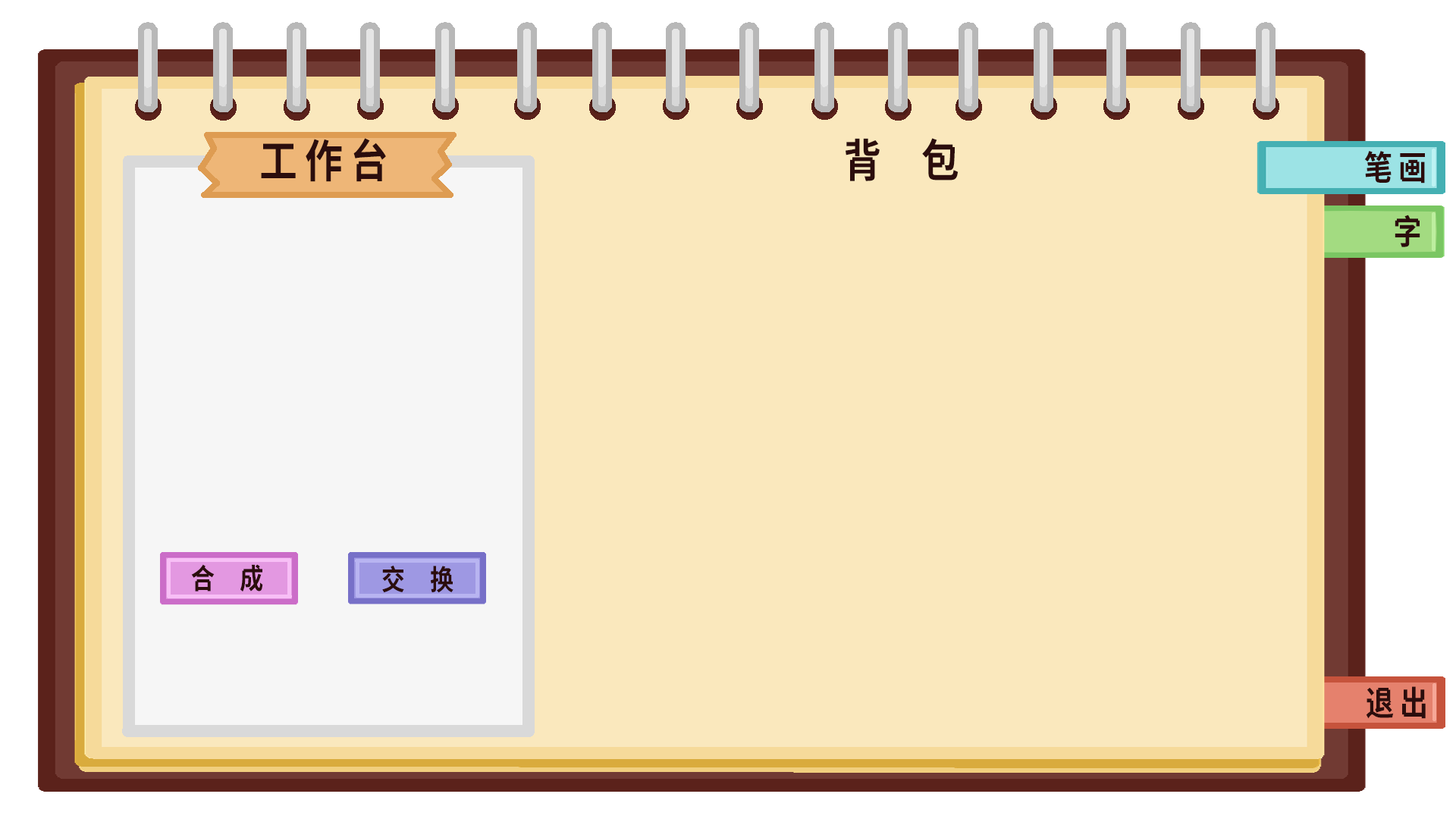
<style>
.page{position:relative;width:1456px;height:819px;background:#fae8bd}
.page>*{position:absolute;margin:0}
.t1{font:45.5px "SweiAliasLegCJKsc-Bold";letter-spacing:0.2em;color:#2b0d0d;text-transform:uppercase;scale:0.83 1}
.t2{font:34.1px "SweiAliasLegCJKsc-Bold";letter-spacing:0.2em;color:#2b0d0d;text-transform:uppercase;scale:0.83 1}
.t3{font:28.4px "SweiAliasLegCJKsc-Bold";letter-spacing:0.2em;color:#2b0d0d;text-transform:uppercase;scale:0.83 1}
</style>
<div class="page">
<p class="t1" style="left:261px;top:138px;width:125px;height:44px">工作台</p>
<p class="t1" style="left:846px;top:138px;width:113px;height:43px">背  包</p>
<p class="t2" style="left:1364px;top:151px;width:61px;height:33px">笔画</p>
<p class="t2" style="left:1395px;top:215px;width:25px;height:32px">字</p>
<p class="t3" style="left:191px;top:564px;width:72px;height:27px">合  成</p>
<p class="t3" style="left:382px;top:565px;width:71px;height:28px">交  换</p>
<p class="t2" style="left:1366px;top:686px;width:60px;height:33px">退出</p>
</div>
